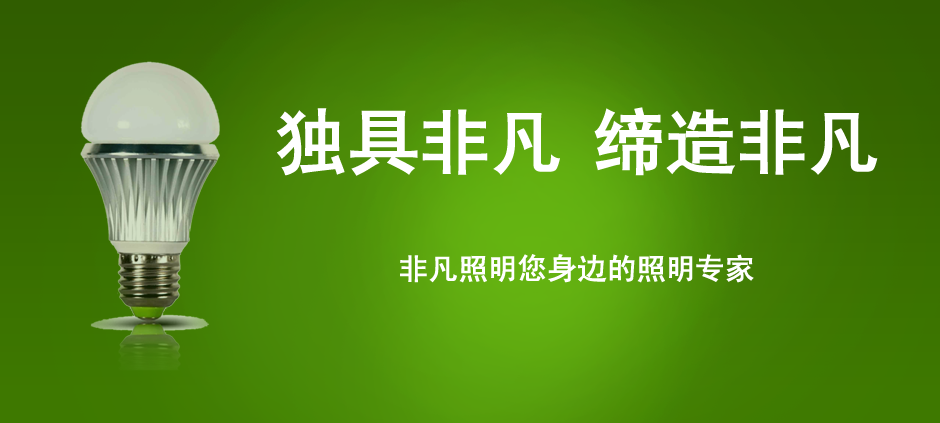
<style>
.page{position:relative;width:940px;height:423px}
.page>*{position:absolute;margin:0}
.t1{font:72px "SimHei";letter-spacing:-0.005em;color:#ffffff;font-weight:bold}
.t2{font:30px "SimHei";letter-spacing:-0.005em;color:#ffffff;font-weight:bold}
</style>
<div class="page">
<p class="t1" style="left:277px;top:107px;width:601px;height:69px">独具非凡,缔造非凡</p>
<p class="t2" style="left:400px;top:254px;width:354px;height:29px">非凡照明您身边的照明专家</p>
</div>
